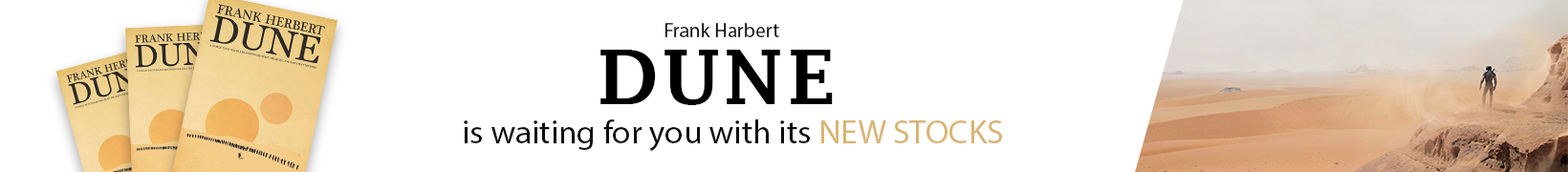
<style>
.page{position:relative;width:1568px;height:172px;background:#ffffff}
.page>*{position:absolute;margin:0}
.t1{font:20.2px "MyriadPro-Regular";color:#0d0d0d}
.t2{font:75.1px "LucidaFax-Demi";letter-spacing:0.06em;color:#000000}
.t3{font:33.7px "MyriadPro-Regular";color:#0b0b0b}
.t4{font:33.7px "MyriadPro-Regular";color:#d9b475}
</style>
<div class="page">
<p class="t1" style="left:664px;top:23px;width:115px;height:14px">Frank Harbert</p>
<p class="t2" style="left:600px;top:50px;width:233px;height:55px">DUNE</p>
<p class="t3" style="left:464px;top:120px;width:538px;height:31px">is waiting for you with its <span class="t4">NEW STOCKS</span></p>
</div>
